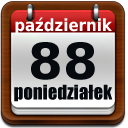
<style>
.page{position:relative;width:128px;height:128px}
.page>*{position:absolute;margin:0}
.t1{font:16.7px "DejaVuSansCondensed-Bold";color:#ffffff}
.t2{font:50px "DejaVuSans-Bold";color:#06090d}
.t3{font:18.8px "Impact";color:#06090d}
</style>
<div class="page">
<p class="t1" style="left:15px;top:17px;width:97px;height:18px">październik</p>
<p class="t2" style="left:31px;top:42px;width:64px;height:38px">88</p>
<p class="t3" style="left:14px;top:84px;width:99px;height:18px">poniedziałek</p>
</div>
